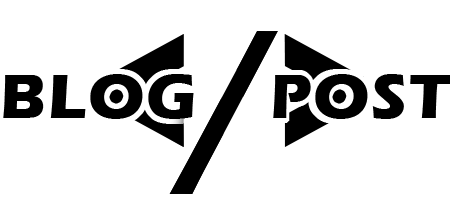
<style>
.page{position:relative;width:450px;height:197px;background:#ffffff}
.page>*{position:absolute;margin:0}
.t1{font:65.2px "ErasITC-Bold";letter-spacing:0.025em;color:#000000}
</style>
<div class="page">
<p class="t1" style="left:3px;top:74px;width:449px;height:45px">BLOG    POST</p>
</div>
